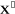
<style>
.page{position:relative;width:15px;height:14px;background:#ffffff}
.page>*{position:absolute;margin:0}
.t1{font:18px "TimesNewRomanPSMT";color:#000000;scale:1.1 1}
</style>
<div class="page">
<p class="t1" style="left:0px;top:5px;width:10px;height:9px">x</p>
</div>
